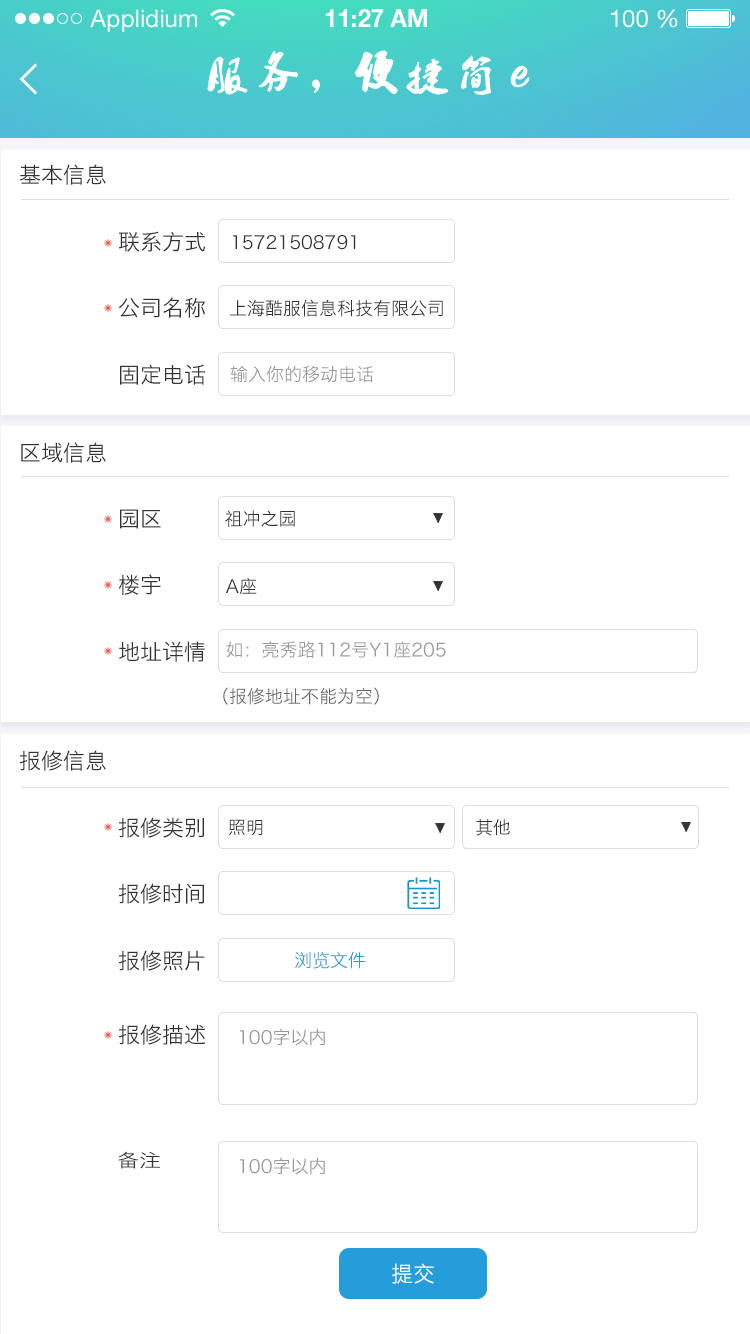
<style>
.page{position:relative;width:750px;height:1334px;background:#ffffff}
.page>*{position:absolute;margin:0}
.t1{font:24px "HelveticaNeueLTStd-Roman";color:#ffffff}
.t2{font:24px "HelveticaNeueLTStd-Bd";color:#ffffff}
.t3{font:22px "HiraginoSansGB-W3";color:#333333;text-transform:uppercase}
.t4{font:18px "HiraginoSansGB-W3";color:#333333;text-transform:uppercase}
.t5{font:18px "HiraginoSansGB-W3";color:#999999;text-transform:uppercase}
.t6{font:18px "HiraginoSansGB-W3";color:#666666;text-transform:uppercase}
.t7{font:18px "HiraginoSansGB-W3";color:#259dda;text-transform:uppercase}
.t8{font:18.6px "HiraginoSansGB-W3";color:#333333;text-transform:uppercase;scale:1.18 1}
.t9{font:22px "HiraginoSansGB-W3";color:#ffffff;text-transform:uppercase}
</style>
<div class="page">
<p class="t1" style="left:90px;top:9px;width:107px;height:23px">Applidium</p>
<p class="t2" style="left:325px;top:9px;width:102px;height:18px">11:27 AM</p>
<p class="t1" style="left:611px;top:9px;width:67px;height:19px">100 %</p>
<p class="t3" style="left:19px;top:164px;width:87px;height:21px">基本信息</p>
<p class="t3" style="left:119px;top:231px;width:87px;height:21px">联系方式</p>
<p class="t4" style="left:233px;top:235px;width:123px;height:15px">15721508791</p>
<p class="t3" style="left:118px;top:297px;width:87px;height:21px">公司名称</p>
<p class="t4" style="left:230px;top:299px;width:213px;height:18px">上海酷服信息科技有限公司</p>
<p class="t3" style="left:120px;top:364px;width:85px;height:21px">固定电话</p>
<p class="t5" style="left:230px;top:365px;width:144px;height:18px">输入你的移动电话</p>
<p class="t3" style="left:21px;top:442px;width:85px;height:21px">区域信息</p>
<p class="t3" style="left:119px;top:509px;width:42px;height:20px">园区</p>
<p class="t4" style="left:225px;top:510px;width:70px;height:17px">祖冲之园</p>
<p class="t3" style="left:118px;top:574px;width:43px;height:21px">楼宇</p>
<p class="t4" style="left:225px;top:577px;width:32px;height:17px">A座</p>
<p class="t3" style="left:119px;top:641px;width:86px;height:21px">地址详情</p>
<p class="t5" style="left:226px;top:641px;width:220px;height:17px">如：亮秀路112号Y1座205</p>
<p class="t6" style="left:223px;top:687px;width:156px;height:18px">（报修地址不能为空）</p>
<p class="t3" style="left:20px;top:750px;width:86px;height:21px">报修信息</p>
<p class="t3" style="left:119px;top:817px;width:85px;height:21px">报修类别</p>
<p class="t4" style="left:229px;top:819px;width:34px;height:17px">照明</p>
<p class="t4" style="left:476px;top:819px;width:34px;height:17px">其他</p>
<p class="t3" style="left:119px;top:883px;width:85px;height:21px">报修时间</p>
<p class="t3" style="left:119px;top:950px;width:86px;height:21px">报修照片</p>
<p class="t7" style="left:295px;top:951px;width:71px;height:18px">浏览文件</p>
<p class="t3" style="left:119px;top:1024px;width:87px;height:21px">报修描述</p>
<p class="t5" style="left:240px;top:1028px;width:85px;height:18px">100字以内</p>
<p class="t8" style="left:118px;top:1151px;width:42px;height:18px">备注</p>
<p class="t5" style="left:240px;top:1157px;width:85px;height:18px">100字以内</p>
<p class="t9" style="left:392px;top:1263px;width:42px;height:21px">提交</p>
</div>
